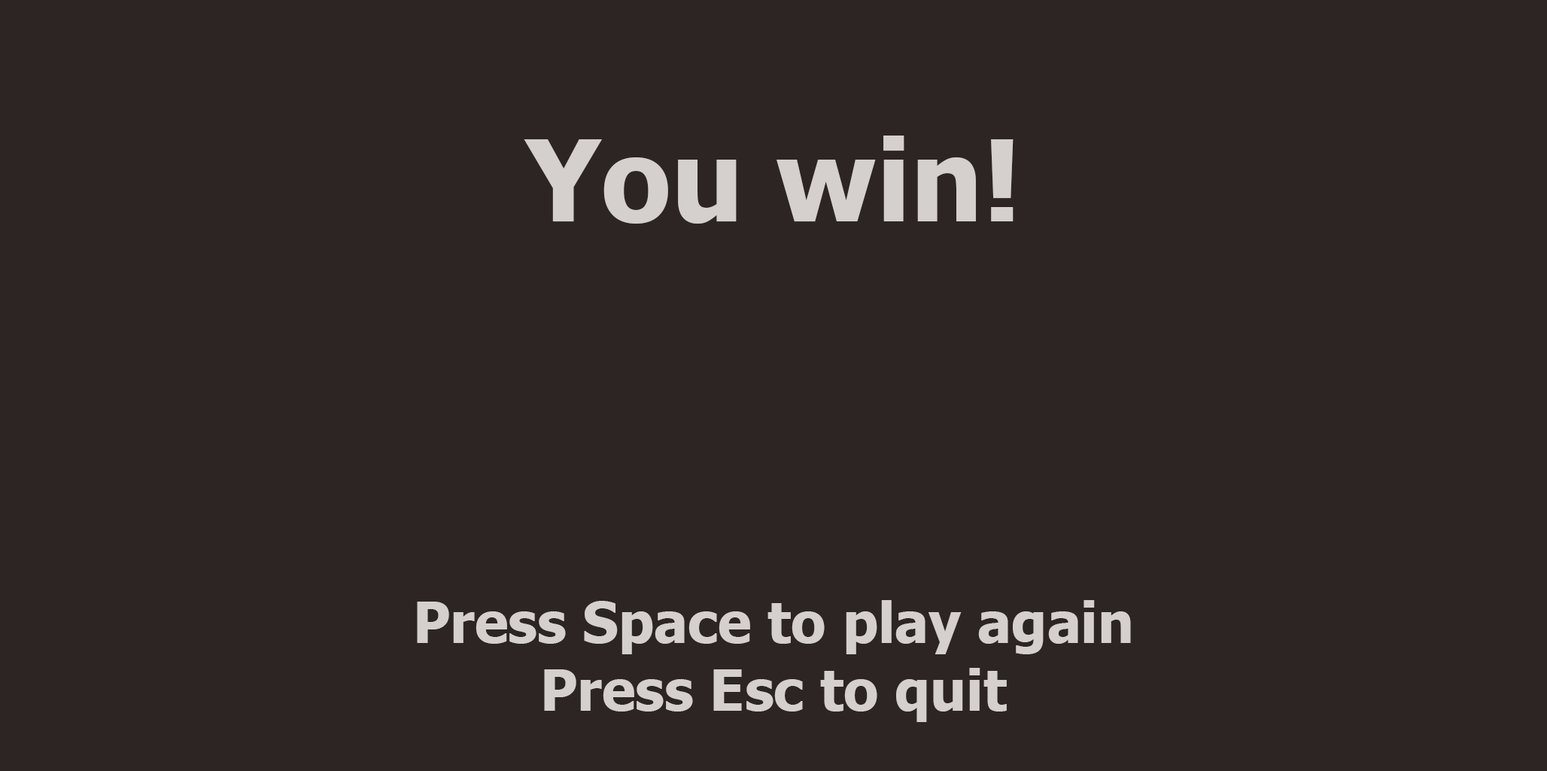
<style>
.page{position:relative;width:1547px;height:771px;background:#2c2524}
.page>*{position:absolute;margin:0}
.t1{font:56.4px "Tahoma-Bold";color:#d5cfcd}
.t2{font:112.9px "Tahoma-Bold";color:#d5cfcd}
</style>
<div class="page">
<p class="t1" style="left:417px;top:135px;width:714px;height:587px;text-align:center"><span class="t2"><br>You win!<br><br><br><br><br><br><br></span>Press Space to play again<br>Press Esc to quit</p>
</div>
